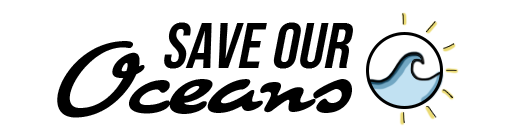
<style>
.page{position:relative;width:513px;height:136px;background:#ffffff}
.page>*{position:absolute;margin:0}
.t1{font:65px "BebasNeue-Regular";color:#000000;font-style:italic}
.t2{font:90px "CuisineOT-Pro";color:#000000;font-style:italic}
</style>
<div class="page">
<p class="t1" style="left:164px;top:22px;width:189px;height:47px">save our</p>
<p class="t2" style="left:57px;top:41px;width:295px;height:77px">Oceans</p>
</div>
